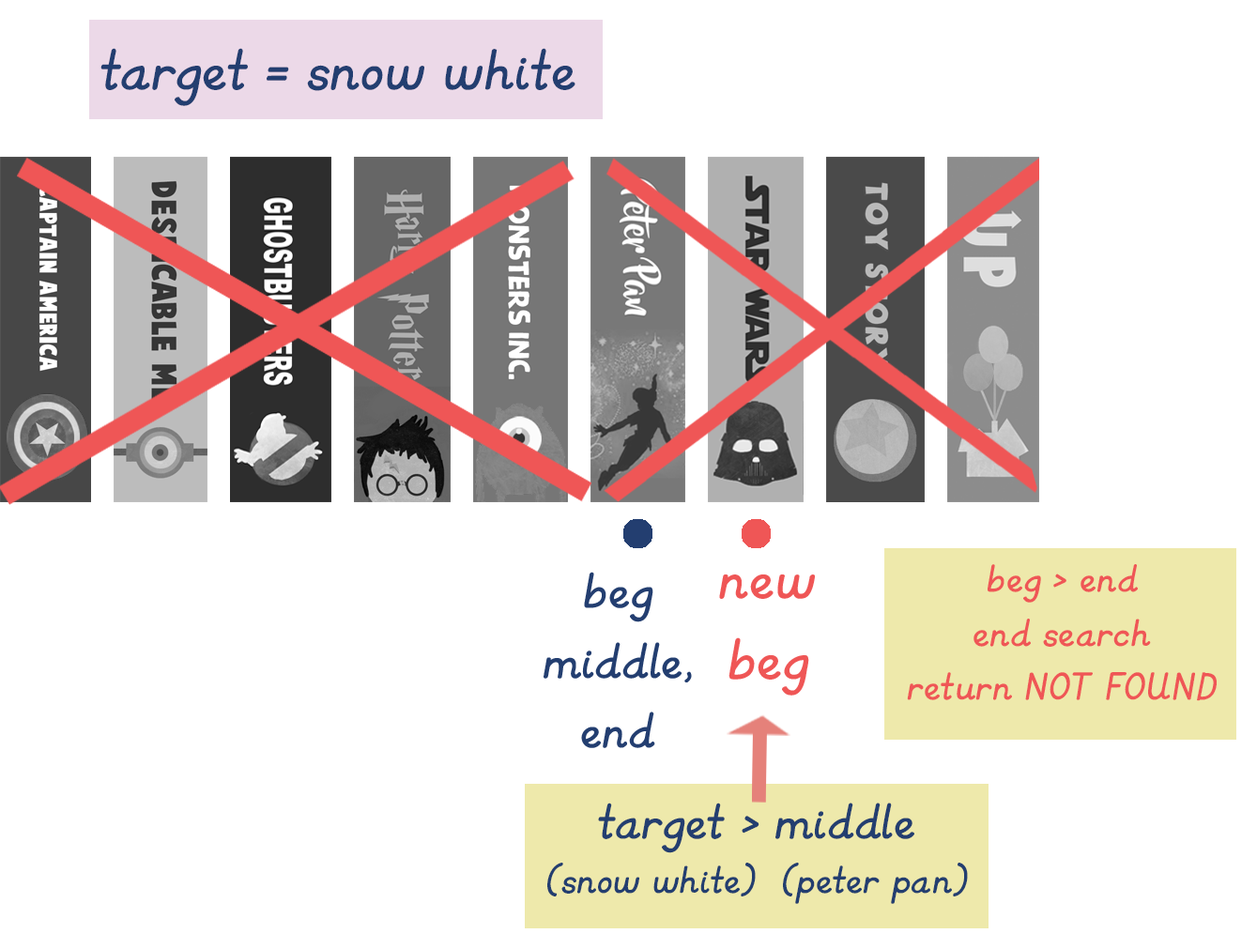
<style>
.page{position:relative;width:1257px;height:949px;background:#ffffff}
.page>*{position:absolute;margin:0}
.t1{font:67.6px "KGPrimaryItalics";color:#233e70}
.t2{font:45px "KGPrimaryItalics";color:#ef5656}
.t3{font:58.2px "KGPrimaryItalics";color:#233e70}
.t4{font:67.6px "KGPrimaryItalics";color:#ef5656}
.t5{font:45px "KGPrimaryItalics";color:#233e70}
</style>
<div class="page">
<p class="t1" style="left:100px;top:48px;width:475px;height:58px">target = snow white</p>
<p class="t2" style="left:907px;top:564px;width:309px;height:137px;text-align:center">beg &gt; end<br>end search<br>return NOT FOUND</p>
<p class="t3" style="left:543px;top:572px;width:149px;height:176px;text-align:center">beg<br>middle,<br>end</p>
<p class="t4" style="left:719px;top:574px;width:96px;height:121px;text-align:center">new <br>beg</p>
<p class="t3" style="left:598px;top:802px;width:316px;height:51px">target &gt; middle</p>
<p class="t5" style="left:547px;top:863px;width:209px;height:33px">(snow white)</p>
<p class="t5" style="left:783px;top:863px;width:185px;height:41px">(peter pan)</p>
</div>
